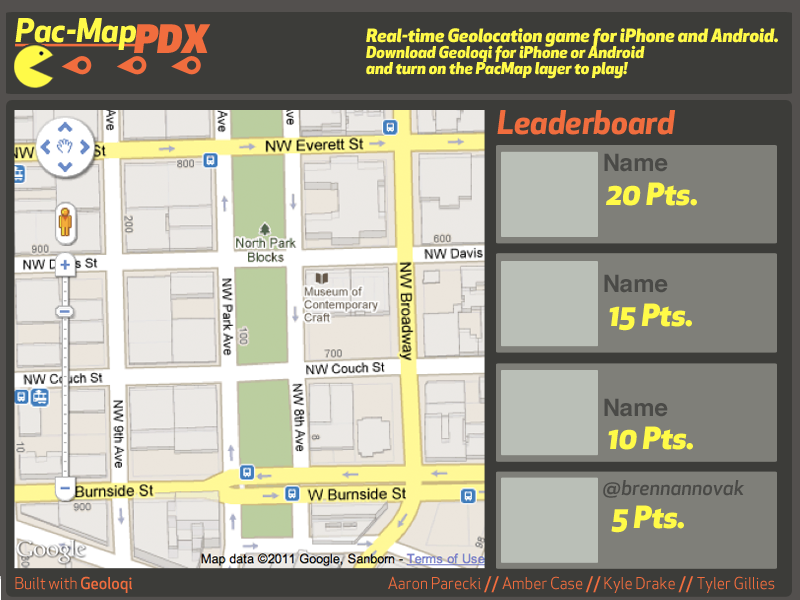
<style>
.page{position:relative;width:800px;height:600px;background:#3c3c39}
.page>*{position:absolute;margin:0}
.t1{font:32.1px "ApexNew-BoldItalic";color:#fffa48}
.t2{font:38.5px "ApexNew-UltraItalic";color:#f16d3e}
.t3{font:16px/16px "ApexNew-HeavyItalic";color:#fffa48}
.t4{font:18px/16px "ApexNew-HeavyItalic";color:#fffa48}
.t5{font:32.1px "ApexNew-BoldItalic";color:#f16d3e}
.t6{font:24px "Helvetica-Bold";color:#4a4a47}
.t7{font:30px "ApexNew-HeavyItalic";color:#fffa48}
.t8{font:20px "ApexNew-MediumItalic";color:#4a4a47}
.t9{font:16px "ApexNew-Book";color:#f16d3e}
.t10{font:16px "ApexNew-Medium";color:#f16d3e}
</style>
<div class="page">
<p class="t1" style="left:15px;top:18px;width:121px;height:32px">Pac-Map</p>
<p class="t2" style="left:134px;top:24px;width:77px;height:29px">PDX</p>
<p class="t3" style="left:366px;top:28px;width:412px;height:51px"><span class="t4">Real-time Geolocation game for iPhone and Android. <br></span>Download Geoloqi for iPhone or Android <br>and turn on the PacMap layer to play!</p>
<p class="t5" style="left:497px;top:110px;width:179px;height:25px">Leaderboard</p>
<p class="t6" style="left:604px;top:153px;width:64px;height:19px">Name</p>
<p class="t7" style="left:606px;top:182px;width:91px;height:24px">20 Pts.</p>
<p class="t6" style="left:604px;top:274px;width:64px;height:19px">Name</p>
<p class="t7" style="left:609px;top:303px;width:83px;height:28px">15 Pts.</p>
<p class="t6" style="left:604px;top:398px;width:64px;height:19px">Name</p>
<p class="t7" style="left:608px;top:426px;width:85px;height:24px">10 Pts.</p>
<p class="t8" style="left:603px;top:480px;width:142px;height:18px">@brennannovak</p>
<p class="t7" style="left:611px;top:505px;width:73px;height:28px">5 Pts.</p>
<p class="t9" style="left:15px;top:576px;width:117px;height:17px">Built with <span class="t10">Geoloqi</span></p>
<p class="t9" style="left:388px;top:576px;width:387px;height:17px">Aaron Parecki <span class="t10">// </span>Amber Case <span class="t10">//</span> Kyle Drake <span class="t10">// </span>Tyler Gillies</p>
</div>
